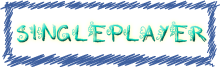
<style>
.page{position:relative;width:220px;height:67px;background:#ffffff}
.page>*{position:absolute;margin:0}
.t1{font:14px "Initialized"}
</style>
<div class="page">
<p class="t1" style="left:16px;top:21px;width:191px;height:22px">SINGLEPLAYER</p>
</div>
